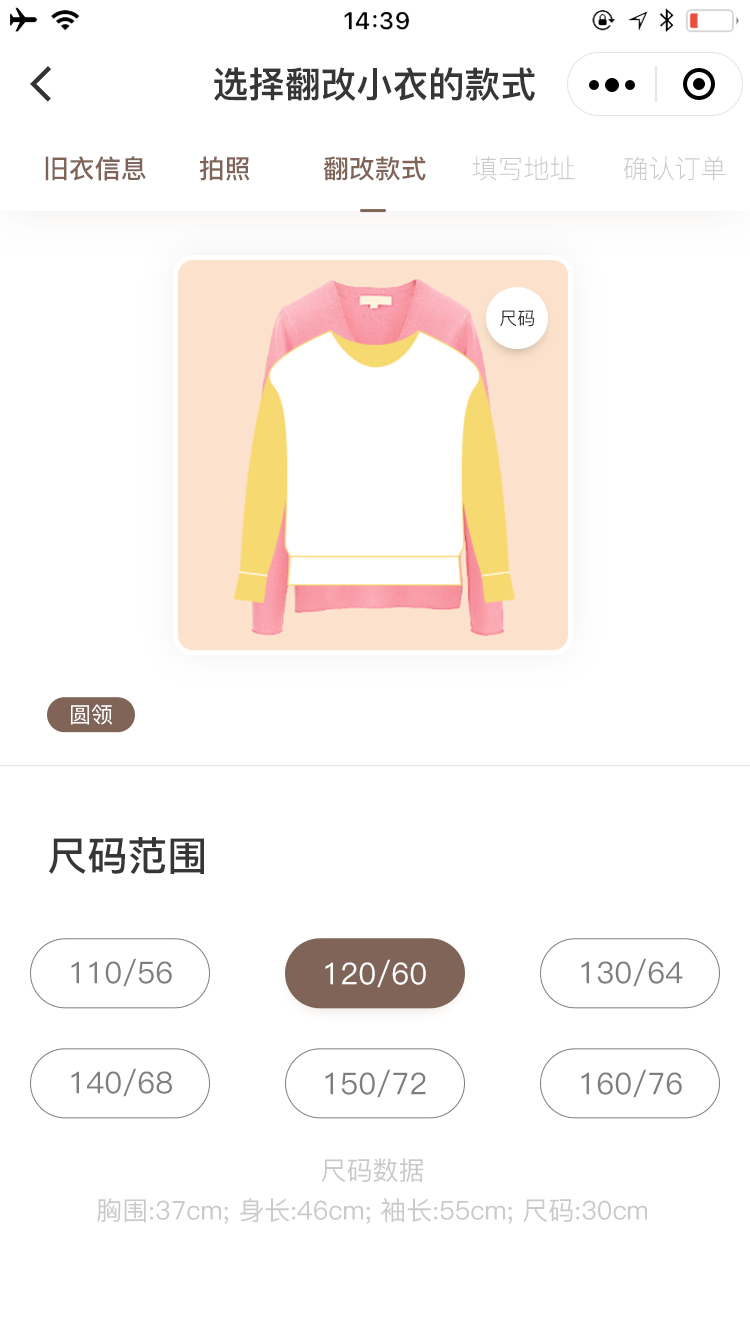
<style>
.page{position:relative;width:750px;height:1334px;background:#ffffff}
.page>*{position:absolute;margin:0}
.t1{font:36px "PingFang-SC-Heavy";color:#363636}
.t2{font:26px "PingFang-SC-Bold";color:#806458}
.t3{font:26px "PingFang-SC-Light";color:#cacaca}
.t4{font:18px "PingFang-SC-Medium";color:#363636}
.t5{font:22px "PingFang-SC-Medium";color:#ffffff}
.t6{font:40px "PingFang-SC-Bold";color:#363636}
.t7{font:30px "PingFang-SC-Medium";color:#7e7e7e}
.t8{font:30px "PingFang-SC-Medium";color:#ffffff}
.t9{font:26px/40px "PingFang-SC-Medium";color:#cacaca}
</style>
<div class="page">
<p class="t1" style="left:214px;top:67px;width:321px;height:34px">选择翻改小衣的款式</p>
<p class="t2" style="left:45px;top:156px;width:101px;height:25px">旧衣信息</p>
<p class="t2" style="left:199px;top:156px;width:51px;height:25px">拍照</p>
<p class="t2" style="left:323px;top:156px;width:103px;height:25px">翻改款式</p>
<p class="t3" style="left:472px;top:156px;width:103px;height:25px">填写地址</p>
<p class="t3" style="left:623px;top:156px;width:103px;height:25px">确认订单</p>
<p class="t4" style="left:500px;top:310px;width:34px;height:17px">尺码</p>
<p class="t5" style="left:71px;top:704px;width:41px;height:21px">圆领</p>
<p class="t6" style="left:49px;top:837px;width:155px;height:37px">尺码范围</p>
<p class="t7" style="left:71px;top:958px;width:101px;height:29px">110/56</p>
<p class="t8" style="left:325px;top:959px;width:101px;height:29px">120/60</p>
<p class="t7" style="left:581px;top:958px;width:102px;height:29px">130/64</p>
<p class="t7" style="left:71px;top:1068px;width:101px;height:29px">140/68</p>
<p class="t7" style="left:325px;top:1069px;width:101px;height:29px">150/72</p>
<p class="t7" style="left:581px;top:1069px;width:101px;height:29px">160/76</p>
<p class="t9" style="left:97px;top:1158px;width:550px;height:66px;text-align:center">尺码数据<br>胸围:37cm; 身长:46cm; 袖长:55cm; 尺码:30cm</p>
</div>
